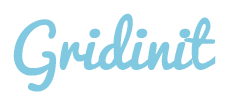
<style>
.page{position:relative;width:232px;height:101px;background:#ffffff}
.page>*{position:absolute;margin:0}
.t1{font:60px "Pacifico-Regular";color:#81c9e0}
</style>
<div class="page">
<p class="t1" style="left:13px;top:13px;width:203px;height:79px">Gridinit</p>
</div>
